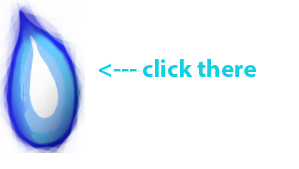
<style>
.page{position:relative;width:299px;height:169px;background:#ffffff}
.page>*{position:absolute;margin:0}
.t1{font:25px "MyriadPro-Bold";color:#0ad2e4}
</style>
<div class="page">
<p class="t1" style="left:99px;top:59px;width:157px;height:18px">&lt;--- click there</p>
</div>
